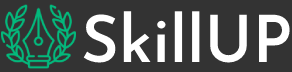
<style>
.page{position:relative;width:292px;height:72px;background:#333333}
.page>*{position:absolute;margin:0}
.t1{font:65px "JosefinSans-SemiBold";color:#ffffff}
</style>
<div class="page">
<p class="t1" style="left:83px;top:11px;width:207px;height:52px">SkillUP</p>
</div>
